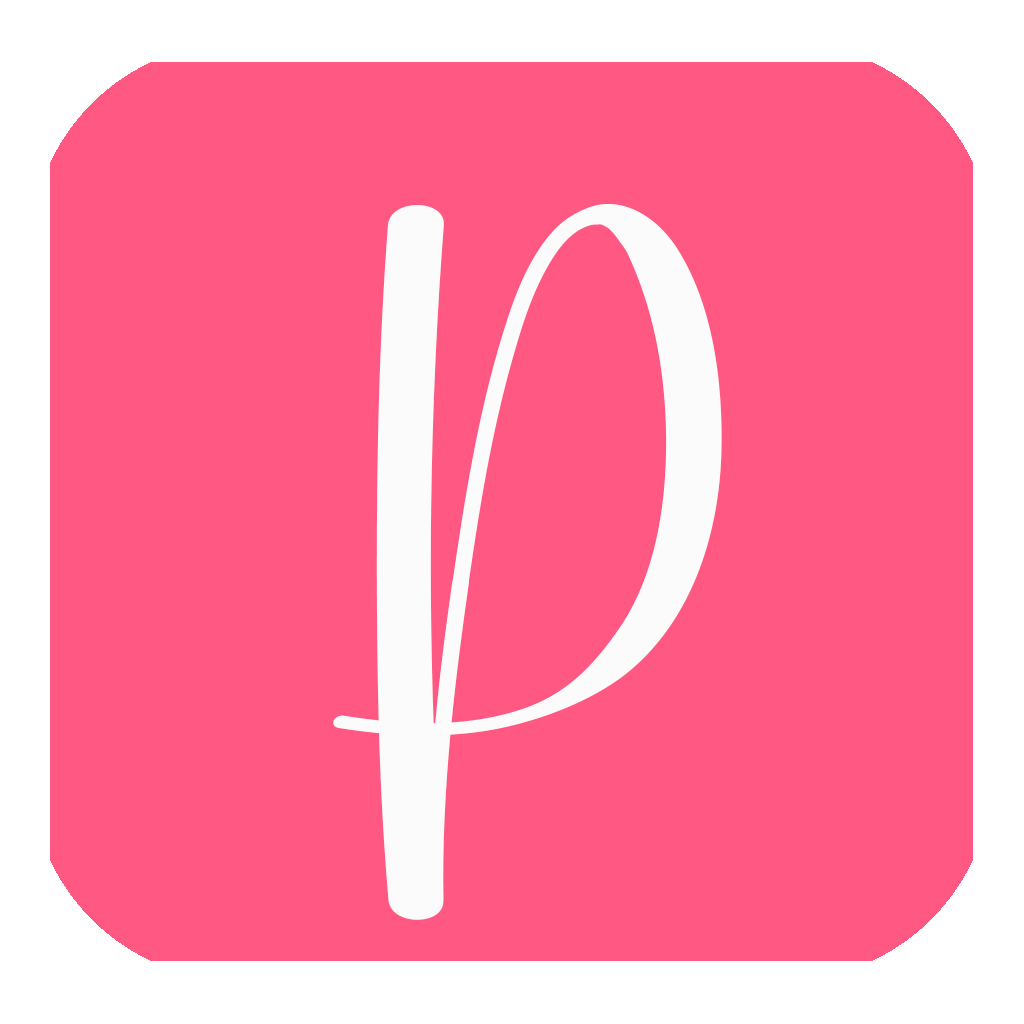
<style>
.page{position:relative;width:1024px;height:1024px;background:#ff5882}
.page>*{position:absolute;margin:0}
.t1{font:635px "DailyBrightRegular";color:#fbfbfb}
</style>
<div class="page">
<p class="t1" style="left:333px;top:204px;width:389px;height:716px">P</p>
</div>
